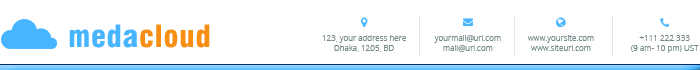
<style>
.page{position:relative;width:700px;height:70px;background:#ffffff}
.page>*{position:absolute;margin:0}
.t1{font:30px "Swiss721BT-BlackCondensed";letter-spacing:0.025em;color:#f68f14}
.t2{font:30px "Swiss721BT-BlackCondensed";letter-spacing:0.025em;color:#47b5ff}
.t3{font:8.1px "OpenSans-Light";color:#74888a}
</style>
<div class="page">
<p class="t1" style="left:69px;top:24px;width:141px;height:24px"><span class="t2">meda</span>cloud</p>
<p class="t3" style="left:322px;top:35px;width:84px;height:17px;text-align:center">123, your address here<br>Dhaka, 1205, BD</p>
<p class="t3" style="left:434px;top:35px;width:67px;height:17px;text-align:center">yourmail@url.com<br>mail@url.com</p>
<p class="t3" style="left:527px;top:35px;width:67px;height:16px;text-align:center">www.yoursite.com<br>www.siteurl.com</p>
<p class="t3" style="left:631px;top:35px;width:68px;height:18px;text-align:center">+111 222 333<br>(9 am- 10 pm) UST</p>
</div>
